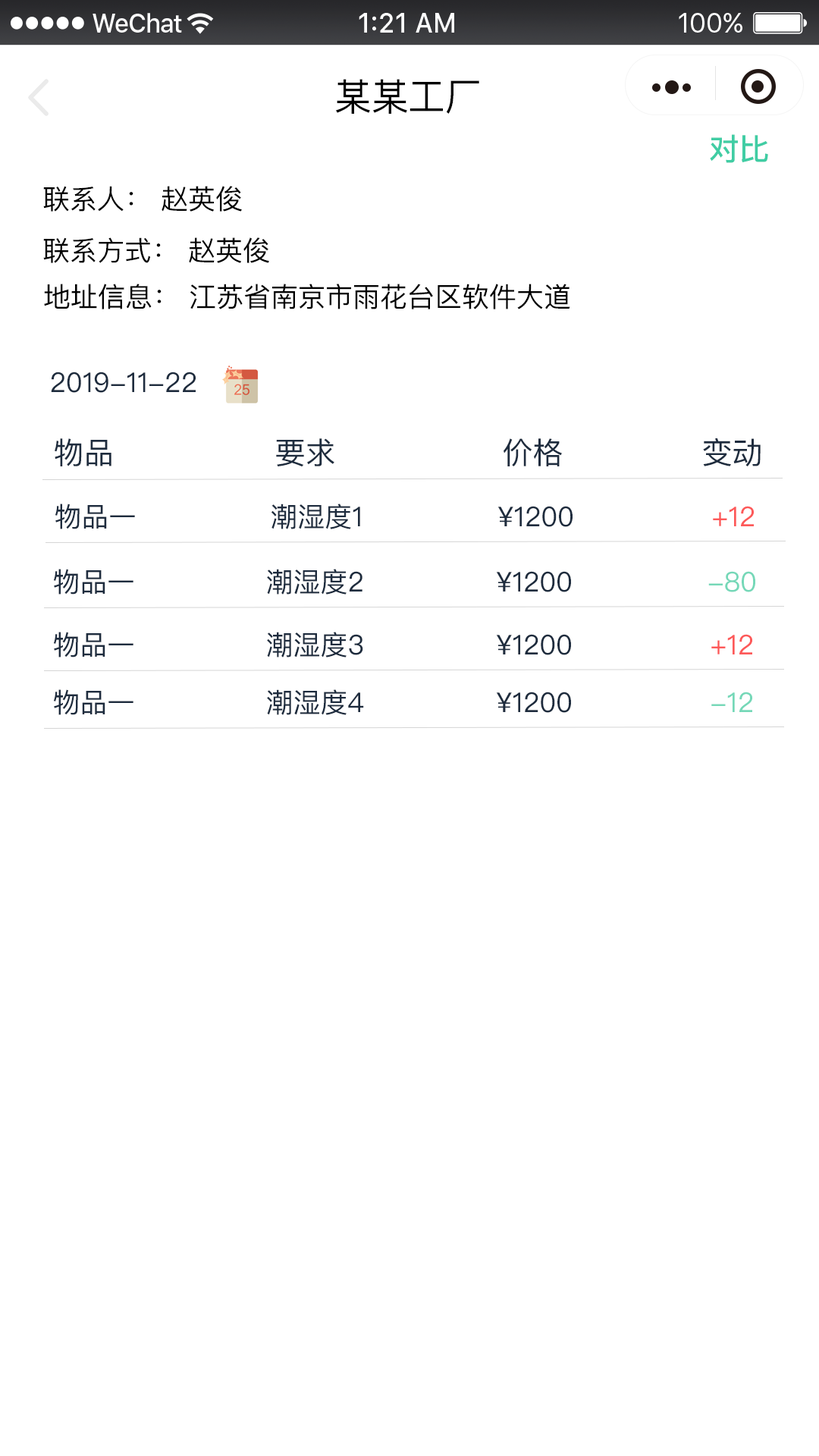
<style>
.page{position:relative;width:819px;height:1456px;background:#ffffff}
.page>*{position:absolute;margin:0}
.t1{font:37.9px "PingFangSC-Regular";color:#000000}
.t2{font:30.3px "PingFangSC-Medium";color:#40cda4}
.t3{font:27.3px "PingFangSC-Regular";color:#000000}
.t4{font:27.3px "PingFangSC-Regular";color:#1e2c3e}
.t5{font:30.3px "PingFangSC-Regular";color:#1e2c3e}
.t6{font:27.3px "PingFangSC-Regular";color:#fd5959}
.t7{font:27.3px "PingFangSC-Regular";color:#75d8b8}
</style>
<div class="page">
<p class="t1" style="left:335px;top:79px;width:144px;height:35px">某某工厂</p>
<p class="t2" style="left:710px;top:134px;width:58px;height:29px">对比</p>
<p class="t3" style="left:43px;top:186px;width:199px;height:26px">联系人： 赵英俊</p>
<p class="t3" style="left:43px;top:237px;width:226px;height:26px">联系方式： 赵英俊</p>
<p class="t3" style="left:44px;top:284px;width:526px;height:25px">地址信息： 江苏省南京市雨花台区软件大道</p>
<p class="t4" style="left:51px;top:372px;width:145px;height:21px">2019-11-22</p>
<p class="t5" style="left:703px;top:438px;width:58px;height:28px">变动</p>
<p class="t5" style="left:55px;top:438px;width:56px;height:28px">物品</p>
<p class="t5" style="left:276px;top:438px;width:58px;height:29px">要求</p>
<p class="t5" style="left:504px;top:438px;width:58px;height:28px">价格</p>
<p class="t4" style="left:55px;top:504px;width:80px;height:25px">物品一</p>
<p class="t4" style="left:271px;top:504px;width:89px;height:25px">潮湿度1</p>
<p class="t4" style="left:497px;top:506px;width:76px;height:21px">¥1200</p>
<p class="t6" style="left:713px;top:506px;width:41px;height:20px">+12</p>
<p class="t4" style="left:53px;top:569px;width:80px;height:26px">物品一</p>
<p class="t4" style="left:267px;top:569px;width:95px;height:26px">潮湿度2</p>
<p class="t4" style="left:496px;top:571px;width:75px;height:21px">¥1200</p>
<p class="t7" style="left:708px;top:571px;width:47px;height:21px">-80</p>
<p class="t4" style="left:53px;top:632px;width:80px;height:25px">物品一</p>
<p class="t4" style="left:267px;top:632px;width:96px;height:25px">潮湿度3</p>
<p class="t4" style="left:496px;top:634px;width:75px;height:21px">¥1200</p>
<p class="t6" style="left:711px;top:634px;width:41px;height:20px">+12</p>
<p class="t4" style="left:53px;top:689px;width:80px;height:26px">物品一</p>
<p class="t4" style="left:267px;top:689px;width:97px;height:26px">潮湿度4</p>
<p class="t4" style="left:496px;top:692px;width:75px;height:21px">¥1200</p>
<p class="t7" style="left:711px;top:692px;width:41px;height:20px">-12</p>
</div>
